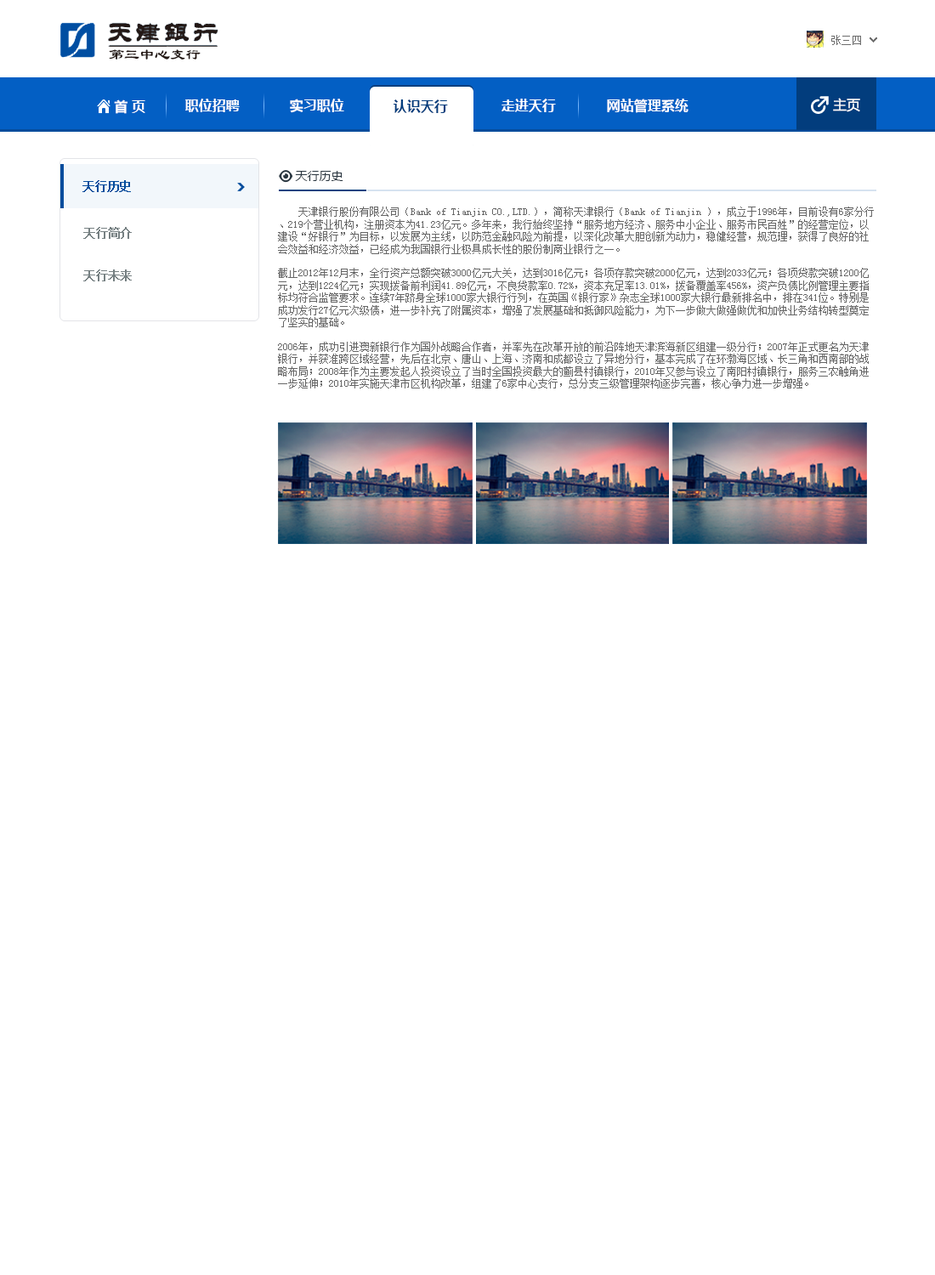
<style>
.page{position:relative;width:935px;height:1275px;background:#ffffff}
.page>*{position:absolute;margin:0}
.t1{font:10.2px "SimSun";color:#6c6c6c}
.t2{font:15.3px "LiSu";color:#241814}
.t3{font:13.6px "MicrosoftYaHei-Bold";color:#ffffff}
.t4{font:13.6px "MicrosoftYaHei-Bold";color:#023d7d}
.t5{font:13.6px "MicrosoftYaHei";color:#ffffff}
.t6{font:11.9px "MicrosoftYaHei";color:#29353f}
.t7{font:11.9px "SimSun";color:#034c9c;font-weight:bold}
.t8{font:10.2px "SimSun";color:#666666}
.t9{font:11.9px "SimSun";color:#768082;font-weight:bold}
</style>
<div class="page">
<p class="t1" style="left:831px;top:35px;width:30px;height:10px">张三四</p>
<p class="t2" style="left:109px;top:49px;width:92px;height:11px">第三中心支行</p>
<p class="t3" style="left:114px;top:99px;width:31px;height:15px">首 页</p>
<p class="t3" style="left:185px;top:99px;width:55px;height:13px">职位招聘</p>
<p class="t3" style="left:290px;top:99px;width:54px;height:14px">实习职位</p>
<p class="t4" style="left:394px;top:99px;width:54px;height:14px">认识天行</p>
<p class="t3" style="left:502px;top:99px;width:54px;height:13px">走进天行</p>
<p class="t3" style="left:607px;top:99px;width:82px;height:14px">网站管理系统</p>
<p class="t5" style="left:833px;top:98px;width:27px;height:14px">主页</p>
<p class="t6" style="left:295px;top:171px;width:48px;height:10px">天行历史</p>
<p class="t7" style="left:82px;top:180px;width:49px;height:12px">天行历史</p>
<p class="t8" style="left:278px;top:207px;width:596px;height:182px">天津银行股份有限公司（Bank of Tianjin CO.,LTD.），简称天津银行（Bank of Tianjin ），成立于1996年，目前设有6家分行、219个营业机构，注册资本为41.23亿元。多年来，我行始终坚持“服务地方经济、服务中小企业、服务市民百姓”的经营定位，以建设“好银行”为目标，以发展为主线，以防范金融风险为前提，以深化改革大胆创新为动力，稳健经营，规范理，获得了良好的社会效益和经济效益，已经成为我国银行业极具成长性的股份制商业银行之一。<br><br>截止2012年12月末，全行资产总额突破3000亿元大关，达到3016亿元；各项存款突破2000亿元，达到2033亿元；各项贷款突破1200亿元，达到1224亿元；实现拨备前利润41.89亿元，不良贷款率0.72%，资本充足率13.01%，拨备覆盖率456%，资产负债比例管理主要指标均符合监管要求。连续7年跻身全球1000家大银行行列，在英国《银行家》杂志全球1000家大银行最新排名中，排在341位。特别是成功发行27亿元次级债，进一步补充了附属资本，增强了发展基础和抵御风险能力，为下一步做大做强做优和加快业务结构转型奠定了坚实的基础。<br><br>2006年，成功引进澳新银行作为国外战略合作者，并率先在改革开放的前沿阵地天津滨海新区组建一级分行；2007年正式更名为天津银行，并获准跨区域经营，先后在北京、唐山、上海、济南和成都设立了异地分行，基本完成了在环渤海区域、长三角和西南部的战略布局；2008年作为主要发起人投资设立了当时全国投资最大的蓟县村镇银行，2010年又参与设立了南阳村镇银行，服务三农触角进一步延伸；2010年实施天津市区机构改革，组建了6家中心支行，总分支三级管理架构逐步完善，核心争力进一步增强。</p>
<p class="t9" style="left:83px;top:227px;width:49px;height:12px">天行简介</p>
<p class="t9" style="left:83px;top:269px;width:49px;height:12px">天行未来</p>
</div>
